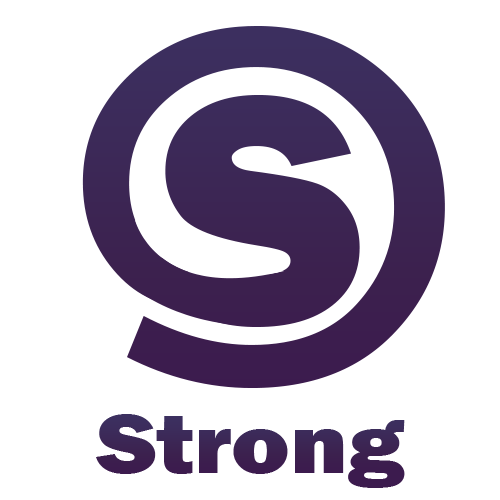
<style>
.page{position:relative;width:500px;height:500px;background:#ffffff}
.page>*{position:absolute;margin:0}
.t1{font:86.9px "FranklinGothic-Heavy";color:#3c2351;scale:1.13 1}
</style>
<div class="page">
<p class="t1" style="left:96px;top:414px;width:309px;height:74px">Strong</p>
</div>
